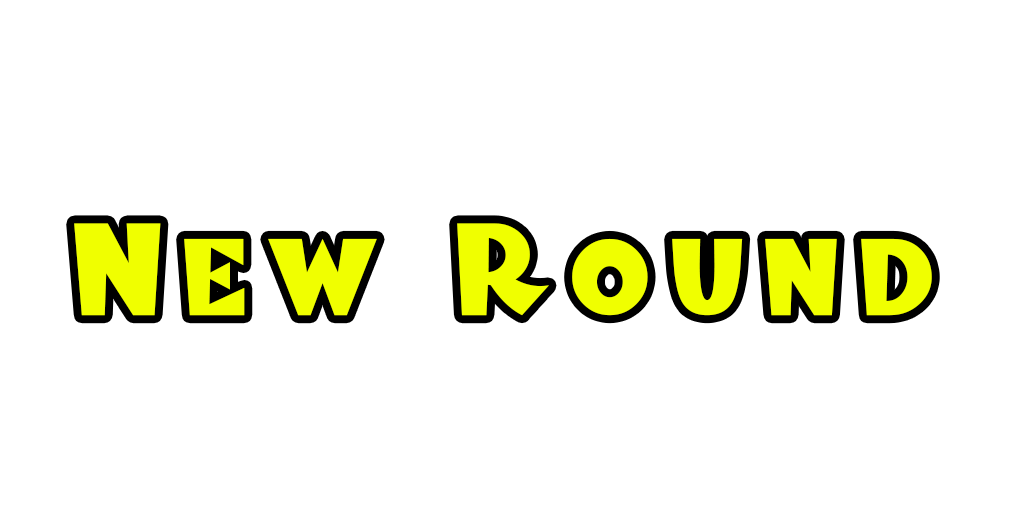
<style>
.page{position:relative;width:1024px;height:512px;background:#ffffff}
.page>*{position:absolute;margin:0}
.t1{font:123px "BlitzkriegNF";letter-spacing:0.159em;color:#f0ff00}
</style>
<div class="page">
<p class="t1" style="left:74px;top:223px;width:858px;height:93px">New Round</p>
</div>
